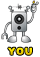
<style>
.page{position:relative;width:40px;height:57px;background:#ffffff}
.page>*{position:absolute;margin:0}
.t1{font:9.2px "Arial-Black";letter-spacing:0.1em;color:#ffea00}
</style>
<div class="page">
<p class="t1" style="left:8px;top:47px;width:24px;height:8px">YOU</p>
</div>
